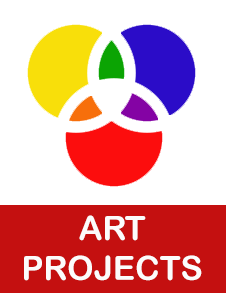
<style>
.page{position:relative;width:226px;height:293px;background:#ffffff}
.page>*{position:absolute;margin:0}
.t1{font:33.3px "ArialRoundedMTBold";color:#fcfcfc}
</style>
<div class="page">
<p class="t1" style="left:24px;top:215px;width:178px;height:66px;text-align:center">ART<br>PROJECTS</p>
</div>
